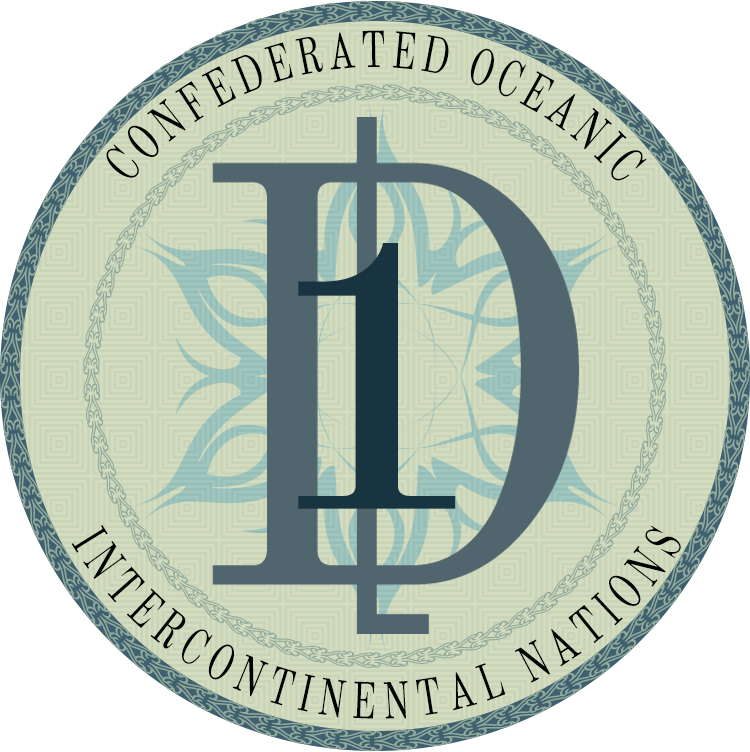
<style>
.page{position:relative;width:750px;height:752px;background:#ffffff}
.page>*{position:absolute;margin:0}
.t1{font:50.9px/33.3px "OldStandardTT-Regular";letter-spacing:0.124em;color:#020202;scale:0.7 1}
.t2{font:388px "OldStandardTT-Regular";letter-spacing:-0.016em;color:#193441;scale:1.19 1}
.t3{font:50.9px "OldStandardTT-Regular";letter-spacing:0.124em;color:#020202;scale:0.7 1}
</style>
<div class="page">
<p class="t1" style="left:106px;top:30px;width:541px;height:151px">CONFEDERATED OCEANIC</p>
<p class="t2" style="left:298px;top:243px;width:158px;height:266px">1</p>
<p class="t3" style="left:71px;top:525px;width:610px;height:194px;rotate:3deg">INTERCONTINENTAL NATIONS</p>
</div>
